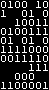
<style>
.page{position:relative;width:49px;height:90px;background:#000000}
.page>*{position:absolute;margin:0}
.t1{font:11px "CourierNewPSMT";color:#ffffff}
</style>
<div class="page">
<p class="t1" style="left:1px;top:1px;width:47px;height:88px">0100 10<br>1  01 0<br>  10011<br>0100111<br>01 01 0<br>1111000<br>0011110<br>    111<br>  000  <br>1100001</p>
</div>
